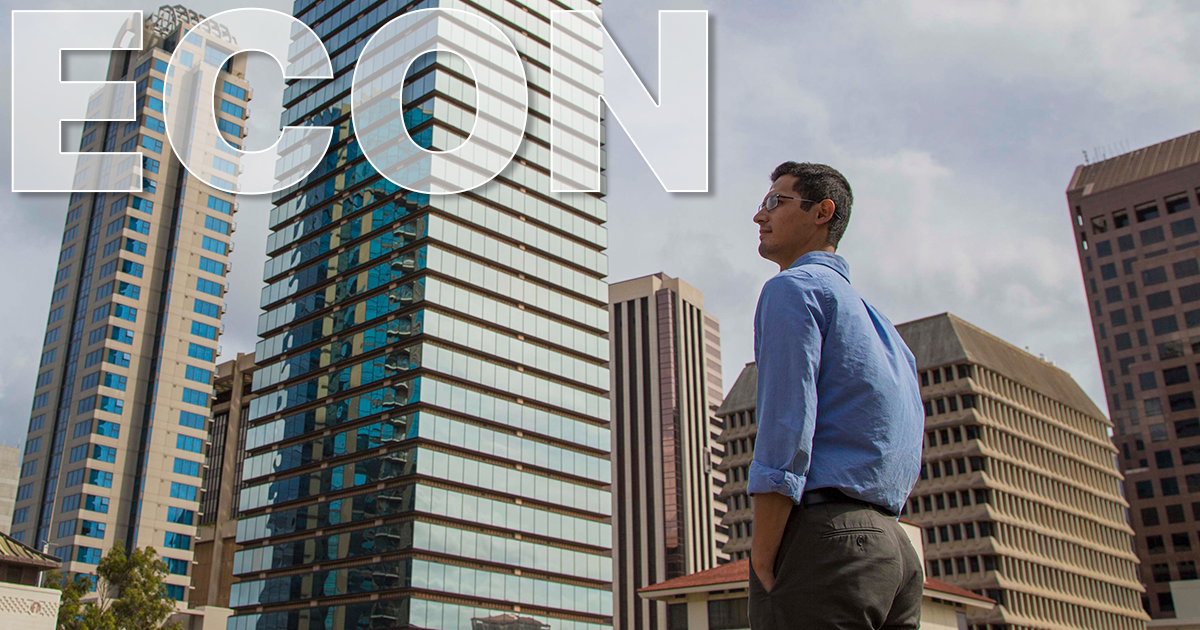
<style>
.page{position:relative;width:1200px;height:630px}
.page>*{position:absolute;margin:0}
.t1{font:250px "Inter-Black"}
</style>
<div class="page">
<p class="t1" style="left:11px;top:7px;width:698px;height:188px">ECON</p>
</div>
